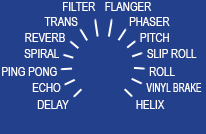
<style>
.page{position:relative;width:206px;height:134px;background:#23408d}
.page>*{position:absolute;margin:0}
.t1{font:12px "ArialNarrow";color:#ffffff}
.t2{font:12px "ArialNarrow";color:#ffffff;scale:0.86 1}
</style>
<div class="page">
<p class="t1" style="left:63px;top:2px;width:33px;height:9px">FILTER</p>
<p class="t1" style="left:105px;top:2px;width:47px;height:9px">FLANGER</p>
<p class="t1" style="left:44px;top:17px;width:34px;height:9px">TRANS</p>
<p class="t1" style="left:129px;top:17px;width:41px;height:9px">PHASER</p>
<p class="t1" style="left:25px;top:33px;width:40px;height:9px">REVERB</p>
<p class="t1" style="left:140px;top:33px;width:29px;height:9px">PITCH</p>
<p class="t1" style="left:24px;top:49px;width:35px;height:9px">SPIRAL</p>
<p class="t1" style="left:147px;top:49px;width:50px;height:9px">SLIP ROLL</p>
<p class="t1" style="left:2px;top:67px;width:55px;height:9px">PING PONG</p>
<p class="t1" style="left:149px;top:67px;width:26px;height:9px">ROLL</p>
<p class="t1" style="left:32px;top:83px;width:29px;height:9px">ECHO</p>
<p class="t2" style="left:146px;top:83px;width:56px;height:9px">VINYL BRAKE</p>
<p class="t1" style="left:37px;top:100px;width:32px;height:9px">DELAY</p>
<p class="t1" style="left:136px;top:100px;width:29px;height:9px">HELIX</p>
</div>
